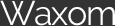
<style>
.page{position:relative;width:115px;height:26px;background:#333333}
.page>*{position:absolute;margin:0}
.t1{font:34px "Raleway-Regular";letter-spacing:-0.04em;color:#ffffff}
</style>
<div class="page">
<p class="t1" style="left:0px;top:0px;width:115px;height:26px">Waxom</p>
</div>
